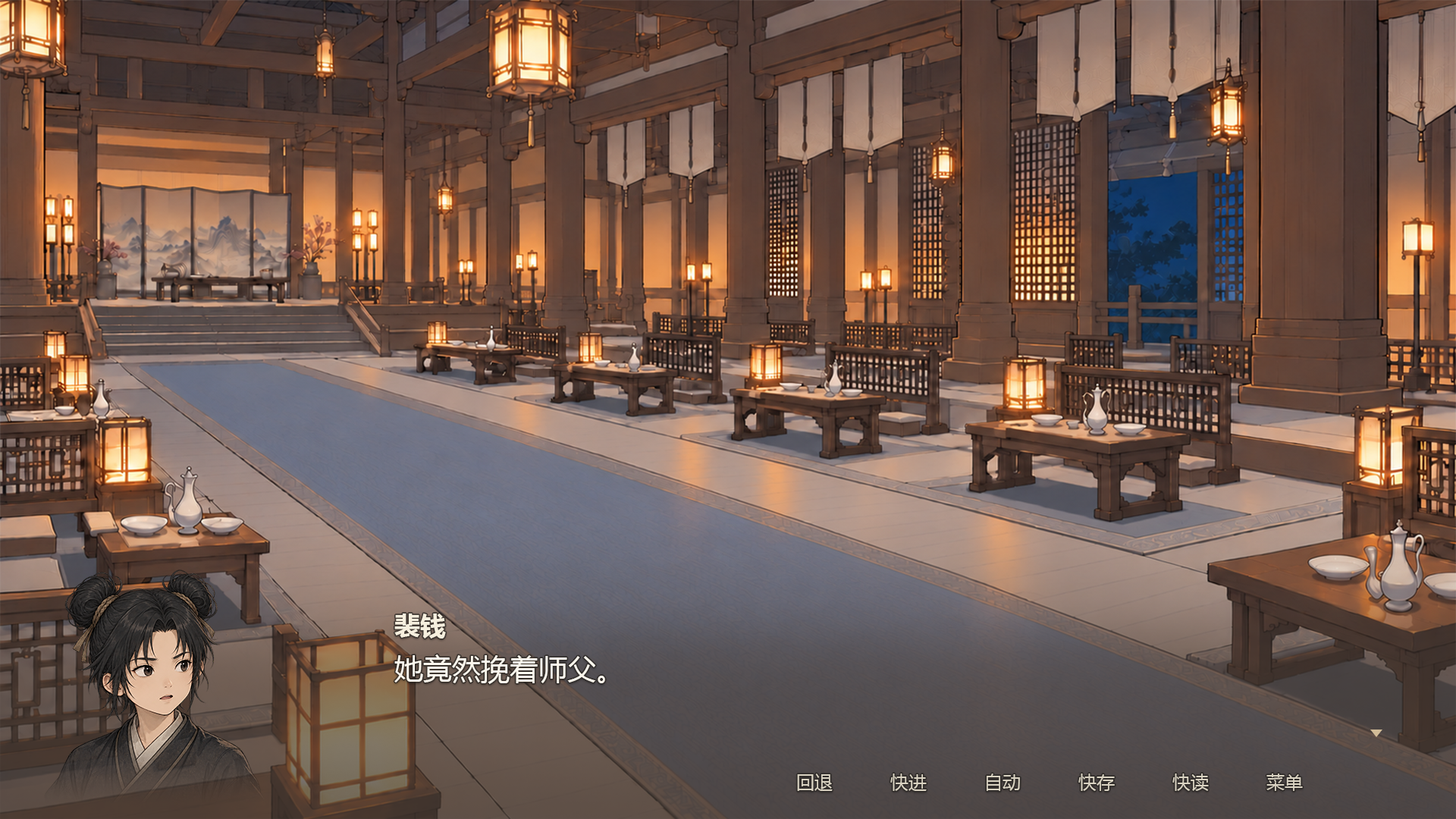
<style>
.page{position:relative;width:1456px;height:819px}
.page>*{position:absolute;margin:0}
.t1{font:25.8px "MicrosoftYaHeiUI-Bold";color:#f6efde}
.t2{font:28.8px "MicrosoftYaHeiUI";color:#fcf7ed}
.t3{font:18.2px "MicrosoftYaHeiUI";color:#dad3c2}
</style>
<div class="page">
<p class="t1" style="left:394px;top:613px;width:52px;height:26px">裴钱</p>
<p class="t2" style="left:394px;top:654px;width:211px;height:30px">她竟然挽着师父。</p>
<p class="t3" style="left:797px;top:773px;width:36px;height:18px">回退</p>
<p class="t3" style="left:890px;top:773px;width:37px;height:18px">快进</p>
<p class="t3" style="left:987px;top:773px;width:33px;height:18px">自动</p>
<p class="t3" style="left:1078px;top:773px;width:37px;height:18px">快存</p>
<p class="t3" style="left:1172px;top:773px;width:37px;height:18px">快读</p>
<p class="t3" style="left:1266px;top:773px;width:37px;height:18px">菜单</p>
</div>
